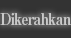
<style>
.page{position:relative;width:71px;height:38px;background:#333333}
.page>*{position:absolute;margin:0}
.t1{font:16px "RyuminPro-ExBold";letter-spacing:-0.08em;color:#c9c9c9;scale:0.9 1}
</style>
<div class="page">
<p class="t1" style="left:0px;top:13px;width:71px;height:12px">Dikerahkan</p>
</div>
